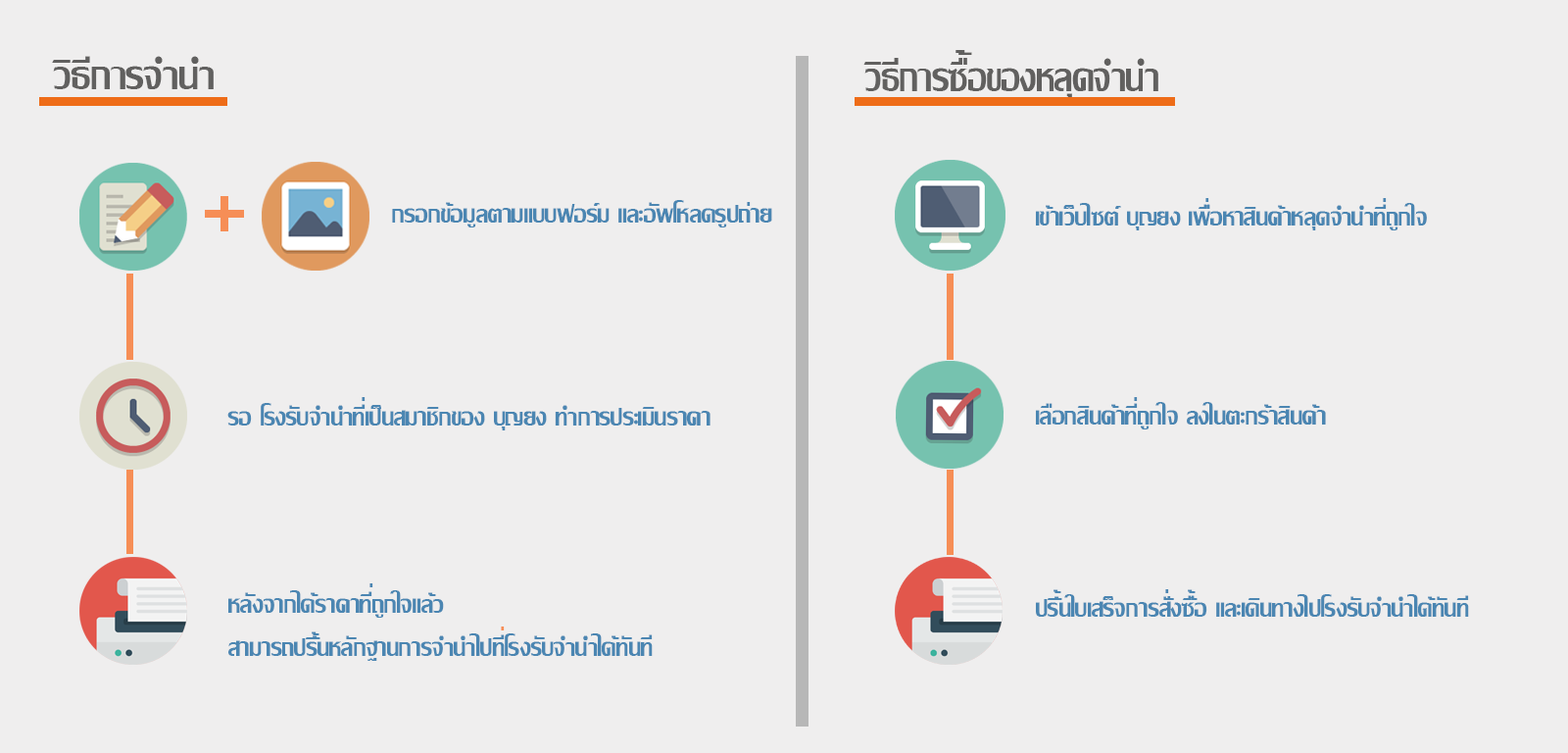
<style>
.page{position:relative;width:1568px;height:753px;background:#efeeee}
.page>*{position:absolute;margin:0}
.t1{font:51.2px "LilyUPC";color:#61605f;scale:1.52 1}
.t2{font:57.2px "LilyUPC";color:#61605f}
.t3{font:57.2px "LilyUPC";color:#61605f;scale:0.93 1}
.t4{font:35.5px "LilyUPC";color:#4b86b2}
.t5{font:35.5px "LilyUPC";color:#f68e56}
</style>
<div class="page">
<p class="t1" style="left:956px;top:50px;width:16px;height:5px">้</p>
<p class="t2" style="left:52px;top:56px;width:162px;height:33px">วิธีการจำนำ</p>
<p class="t3" style="left:863px;top:58px;width:295px;height:41px">วิธีการซือของหลุดจำนำ</p>
<p class="t4" style="left:1205px;top:198px;width:4px;height:4px">่</p>
<p class="t4" style="left:1383px;top:198px;width:4px;height:4px">่</p>
<p class="t4" style="left:392px;top:200px;width:380px;height:27px">กรอกข้อมูลตามแบบฟอร์ม และอัพโหลดรูปถ่าย</p>
<p class="t4" style="left:1036px;top:203px;width:391px;height:27px">เข้าเว็บไซต์ บุญยง เพื่อหาสินค้าหลุดจำนำที่ถูกใจ</p>
<p class="t4" style="left:362px;top:397px;width:4px;height:4px">่</p>
<p class="t4" style="left:1036px;top:402px;width:290px;height:27px">เลือกสินค้าที่ถูกใจ ลงในตะกร้าสินค้า</p>
<p class="t4" style="left:1134px;top:397px;width:4px;height:4px">่</p>
<p class="t4" style="left:227px;top:403px;width:483px;height:27px">รอ โรงรับจำนำที่เป็นสมาชิกของ บุญยง ทำการประเมินราคา</p>
<p class="t4" style="left:228px;top:590px;width:425px;height:71px">หลังจากได้ราคาที่ถูกใจแล้ว <br>สามารถปริ้นหลักฐานการจำนำไปที่โรงรับจำนำได้ทันที</p>
<p class="t4" style="left:369px;top:583px;width:4px;height:4px">่</p>
<p class="t4" style="left:1036px;top:594px;width:433px;height:22px">ปริ้นใบเสร็จการสั่งซื้อ และเดินทางไปโรงรับจำนำได้ทันที</p>
<p class="t4" style="left:1054px;top:589px;width:7px;height:4px">้</p>
<p class="t4" style="left:1165px;top:589px;width:4px;height:4px">่</p>
<p class="t4" style="left:1188px;top:589px;width:8px;height:4px">้</p>
<p class="t5" style="left:501px;top:626px;width:4px;height:4px">่</p>
<p class="t4" style="left:312px;top:631px;width:7px;height:4px">้</p>
</div>
